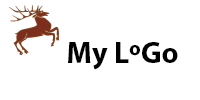
<style>
.page{position:relative;width:200px;height:100px;background:#ffffff}
.page>*{position:absolute;margin:0}
.t1{font:30px "MyriadPro-Bold";color:#000000}
</style>
<div class="page">
<p class="t1" style="left:68px;top:42px;width:110px;height:28px">My LoGo</p>
</div>
